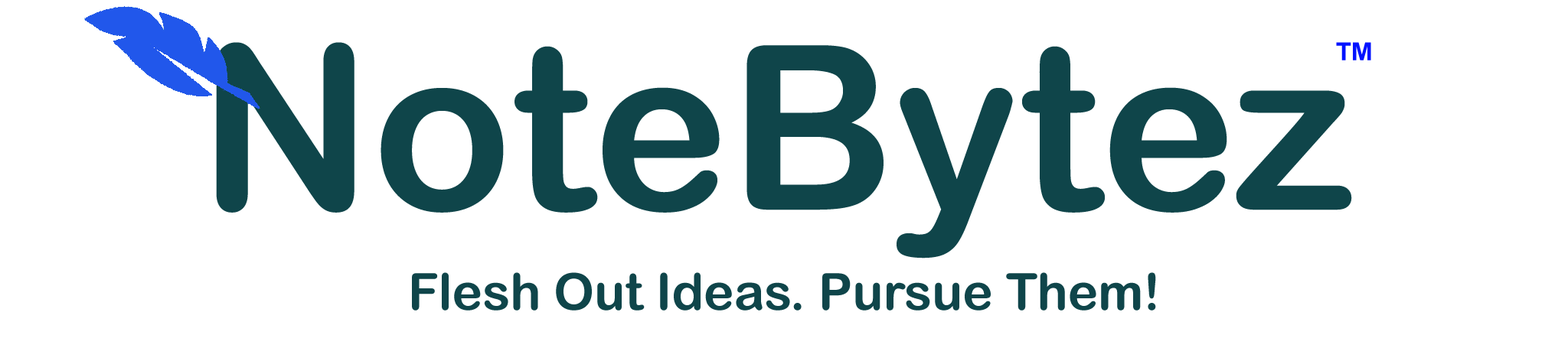
<style>
.page{position:relative;width:1568px;height:361px;background:#ffffff}
.page>*{position:absolute;margin:0}
.t1{font:229.7px "ArialRoundedMTBold";color:#0f454a}
.t2{font:44.7px "ArialRoundedMTBold";color:#0012ff}
.t3{font:51px "ArialRoundedMTBold";color:#0f454a}
.t4{font:51px "ArialRoundedMTBold";letter-spacing:-0.06em;color:#0f454a}
</style>
<div class="page">
<p class="t1" style="left:216px;top:42px;width:1136px;height:217px">NoteBytez</p>
<p class="t2" style="left:1336px;top:42px;width:35px;height:18px">™</p>
<p class="t3" style="left:412px;top:273px;width:744px;height:38px">Flesh Out Ideas. Pursue Them<span class="t4">!</span></p>
</div>
